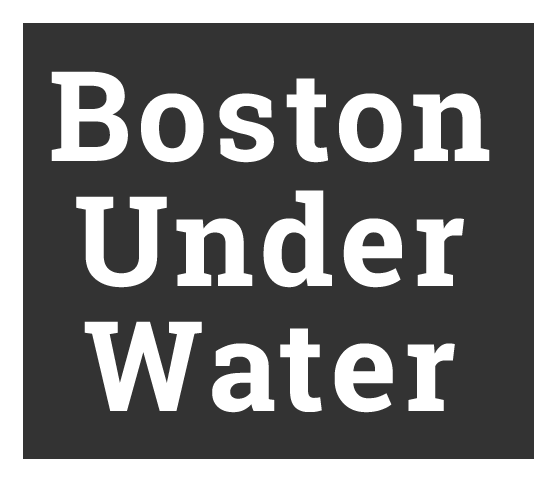
<style>
.page{position:relative;width:557px;height:482px;background:#333333}
.page>*{position:absolute;margin:0}
.t1{font:125px/125px "RobotoSlab-Bold";letter-spacing:0.05em;color:#ffffff}
</style>
<div class="page">
<p class="t1" style="left:51px;top:71px;width:439px;height:342px;text-align:center">Boston<br>Under<br>Water</p>
</div>
